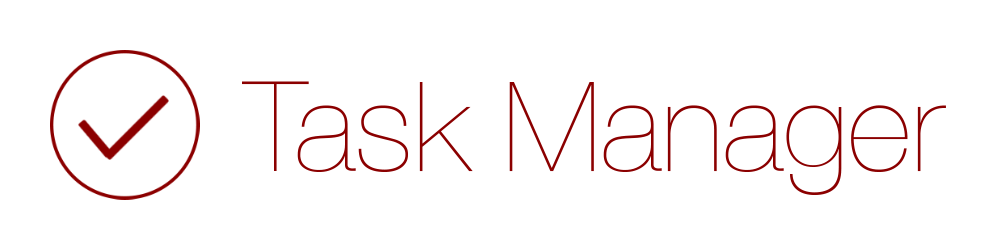
<style>
.page{position:relative;width:1000px;height:250px;background:#ffffff}
.page>*{position:absolute;margin:0}
.t1{font:125px "HelveticaNeue-UltraLight";color:#8b0000}
</style>
<div class="page">
<p class="t1" style="left:242px;top:81px;width:704px;height:114px">Task Manager</p>
</div>
